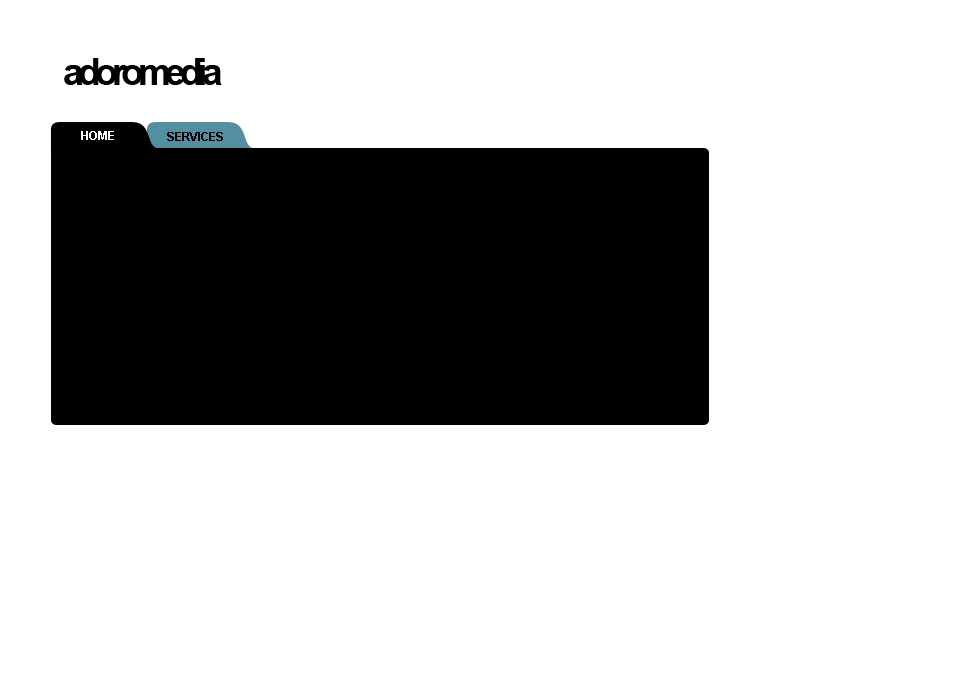
<style>
.page{position:relative;width:980px;height:700px;background:#ffffff}
.page>*{position:absolute;margin:0}
.t1{font:37px "Arial-BoldMT";letter-spacing:-0.15em;color:#000000}
.t2{font:12px "Arial-BoldMT";color:#ffffff}
.t3{font:12px "Arial-BoldMT";color:#000000}
</style>
<div class="page">
<p class="t1" style="left:64px;top:58px;width:158px;height:27px">adoromedia</p>
<p class="t2" style="left:81px;top:131px;width:33px;height:9px">HOME</p>
<p class="t3" style="left:167px;top:132px;width:56px;height:9px">SERVICES</p>
</div>
